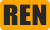
<style>
.page{position:relative;width:50px;height:30px;background:#ffa600}
.page>*{position:absolute;margin:0}
.t1{font:26px "Impact";color:#282828;scale:1.15 1}
</style>
<div class="page">
<p class="t1" style="left:3px;top:4px;width:44px;height:21px">REN</p>
</div>
